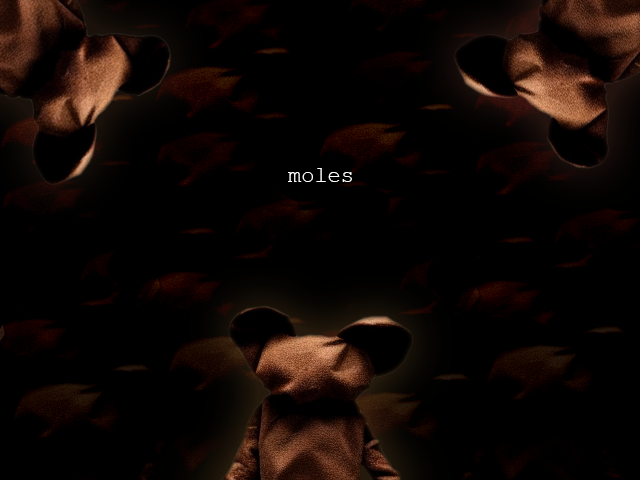
<style>
.page{position:relative;width:640px;height:480px;background:#000000}
.page>*{position:absolute;margin:0}
.t1{font:22px "CourierNewPSMT";color:#ffffff}
</style>
<div class="page">
<p class="t1" style="left:288px;top:168px;width:64px;height:14px">moles</p>
</div>
